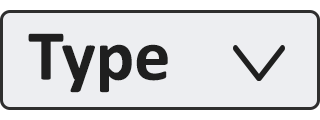
<style>
.page{position:relative;width:320px;height:120px;background:#edeef1}
.page>*{position:absolute;margin:0}
.t1{font:72px "Calibri-Bold";color:#1f1f1f}
</style>
<div class="page">
<p class="t1" style="left:28px;top:33px;width:140px;height:60px">Type</p>
</div>
